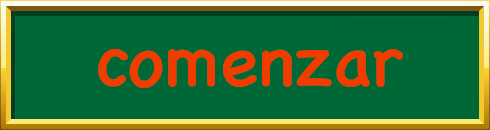
<style>
.page{position:relative;width:490px;height:130px;background:#006737}
.page>*{position:absolute;margin:0}
.t1{font:72px "ChalkboardSE-Regular";color:#f13c00}
</style>
<div class="page">
<p class="t1" style="left:98px;top:49px;width:305px;height:39px">comenzar</p>
</div>
